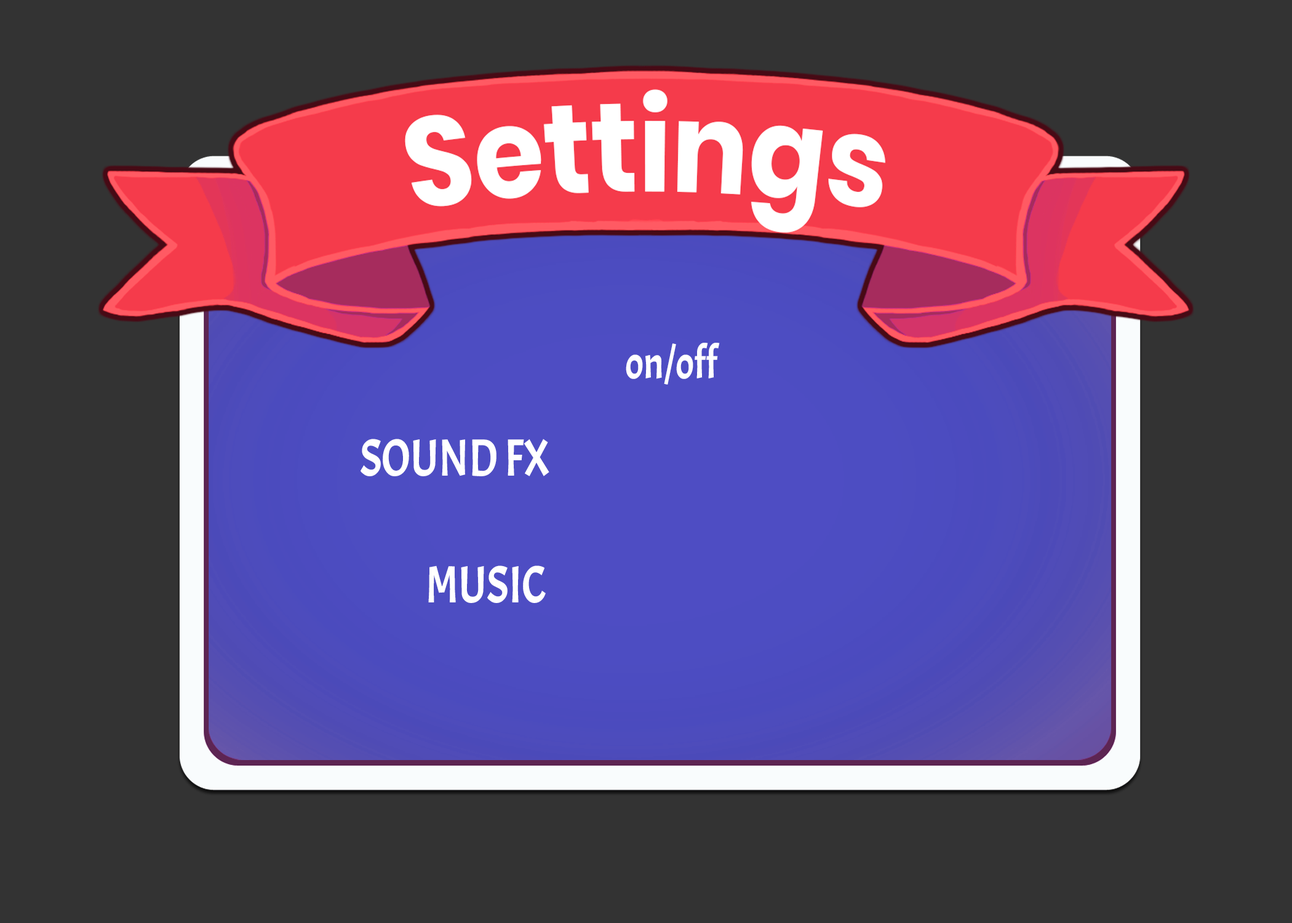
<style>
.page{position:relative;width:1292px;height:923px;background:#333333}
.page>*{position:absolute;margin:0}
.t1{font:46.1px "Acme-Regular";color:#ffffff;scale:0.83 1}
.t2{font:52.3px "Acme-Regular";color:#ffffff;scale:0.83 1}
</style>
<div class="page">
<p class="t1" style="left:626px;top:343px;width:94px;height:42px">on/off</p>
<p class="t2" style="left:361px;top:439px;width:188px;height:37px">SOUND FX</p>
<p class="t2" style="left:428px;top:565px;width:118px;height:38px">MUSIC</p>
</div>
